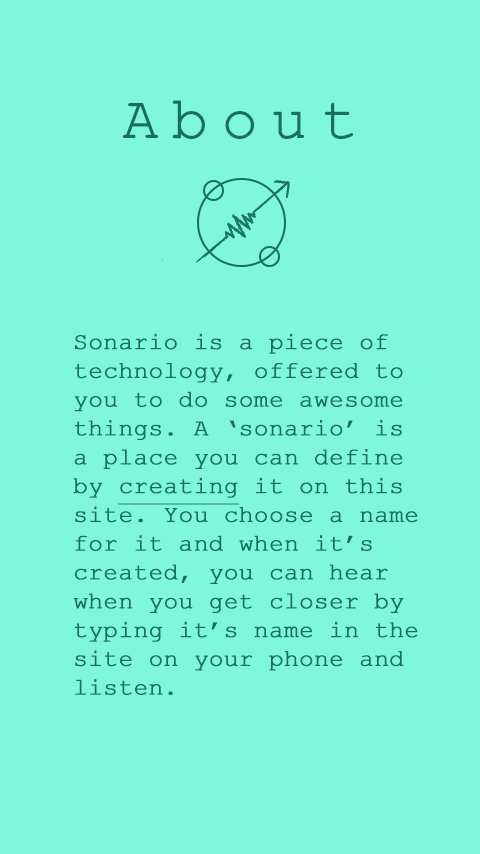
<style>
.page{position:relative;width:480px;height:854px;background:#7ef7dc}
.page>*{position:absolute;margin:0}
.t1{font:60px "CourierNewPSMT";letter-spacing:0.2em;color:#186f5c;font-weight:bold}
.t2{font:24px "CourierNewPSMT";color:#186f5c;font-weight:bold}
.t3{font:24px "CourierNewPSMT";color:#186f5c;font-weight:bold;text-decoration:underline}
</style>
<div class="page">
<p class="t1" style="left:122px;top:100px;width:231px;height:39px">About</p>
<p class="t2" style="left:73px;top:333px;width:345px;height:362px">Sonario is a piece of technology, offered to you to do some awesome things. A ‘sonario’ is a place you can define by <span class="t3">creating</span> it on this site. You choose a name for it and when it’s created, you can hear when you get closer by typing it’s name in the site on your phone and listen.</p>
</div>
